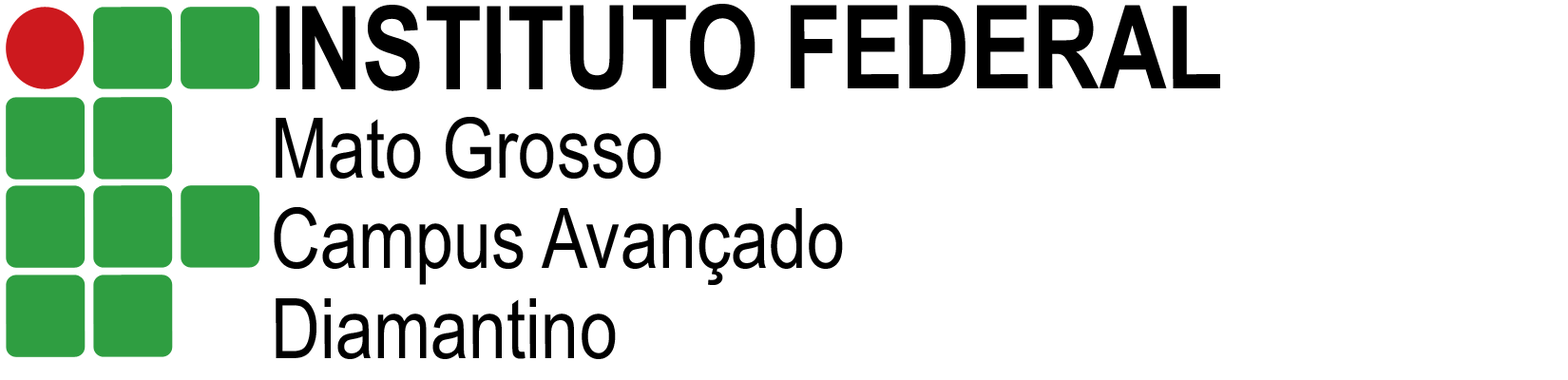
<style>
.page{position:relative;width:1568px;height:380px;background:#ffffff}
.page>*{position:absolute;margin:0}
.t1{font:115.9px "ArialNarrow-Bold";color:#000000}
.t2{font:83.6px "ArialNarrow";color:#000000}
</style>
<div class="page">
<p class="t1" style="left:276px;top:4px;width:944px;height:87px">INSTITUTO FEDERAL</p>
<p class="t2" style="left:276px;top:117px;width:385px;height:62px">Mato Grosso</p>
<p class="t2" style="left:274px;top:207px;width:569px;height:78px">Campus Avançado</p>
<p class="t2" style="left:276px;top:298px;width:340px;height:61px">Diamantino</p>
</div>
